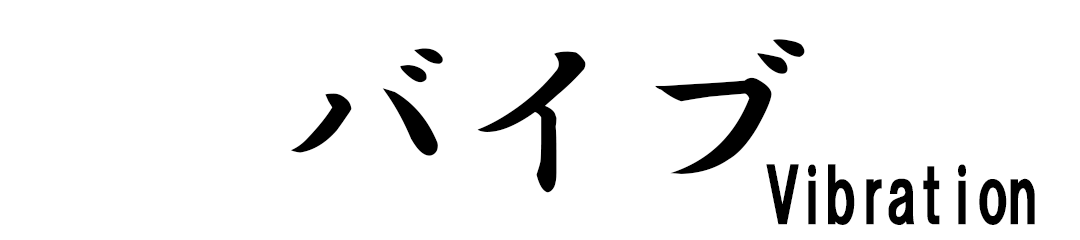
<style>
.page{position:relative;width:1080px;height:240px;background:#ffffff}
.page>*{position:absolute;margin:0}
.t1{font:195.8px "HGSGyoshotai";letter-spacing:-0.1em;color:#000000}
.t2{font:75px "HGSoeiKakugothicUB";letter-spacing:-0.1em;color:#000000}
</style>
<div class="page">
<p class="t1" style="left:290px;top:39px;width:515px;height:154px">バイブ</p>
<p class="t2" style="left:766px;top:164px;width:269px;height:61px">Vibration</p>
</div>
